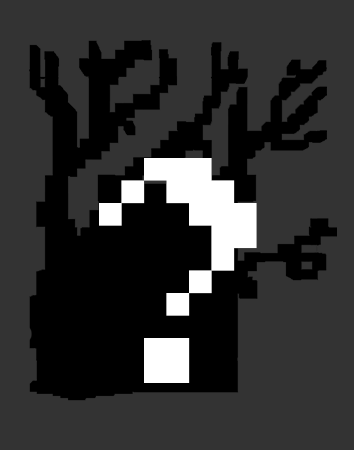
<style>
.page{position:relative;width:354px;height:450px;background:#333333}
.page>*{position:absolute;margin:0}
.t1{font:360px "Alagard";color:#ffffff;font-variant:small-caps}
</style>
<div class="page">
<p class="t1" style="left:99px;top:158px;width:158px;height:225px">?</p>
</div>
